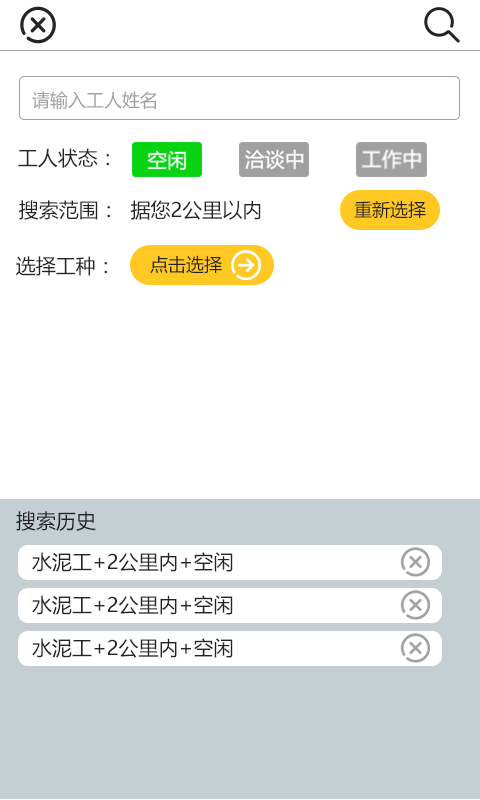
<style>
.page{position:relative;width:480px;height:800px;background:#ffffff}
.page>*{position:absolute;margin:0}
.t1{font:18px "MicrosoftYaHei";color:#a0a0a0}
.t2{font:20px "MicrosoftYaHei";color:#252323}
.t3{font:18px "MicrosoftYaHei";color:#252323}
</style>
<div class="page">
<p class="t1" style="left:32px;top:91px;width:124px;height:18px">请输入工人姓名</p>
<p class="t2" style="left:18px;top:148px;width:91px;height:20px">工人状态：</p>
<p class="t2" style="left:19px;top:200px;width:242px;height:20px">搜索范围：  据您2公里以内</p>
<p class="t3" style="left:354px;top:200px;width:72px;height:19px">重新选择</p>
<p class="t2" style="left:16px;top:256px;width:91px;height:20px">选择工种：</p>
<p class="t3" style="left:150px;top:255px;width:72px;height:19px">点击选择</p>
<p class="t2" style="left:16px;top:511px;width:80px;height:20px">搜索历史</p>
<p class="t2" style="left:32px;top:552px;width:201px;height:20px">水泥工+2公里内+空闲</p>
<p class="t2" style="left:32px;top:595px;width:201px;height:20px">水泥工+2公里内+空闲</p>
<p class="t2" style="left:32px;top:638px;width:201px;height:20px">水泥工+2公里内+空闲</p>
</div>
